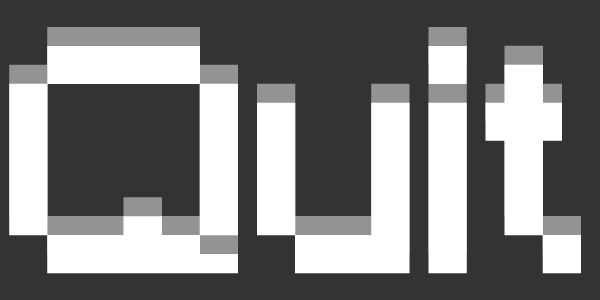
<style>
.page{position:relative;width:600px;height:300px;background:#333333}
.page>*{position:absolute;margin:0}
.t1{font:302.6px "Minecraft";color:#ffffff}
</style>
<div class="page">
<p class="t1" style="left:9px;top:46px;width:572px;height:228px">Quit</p>
</div>
